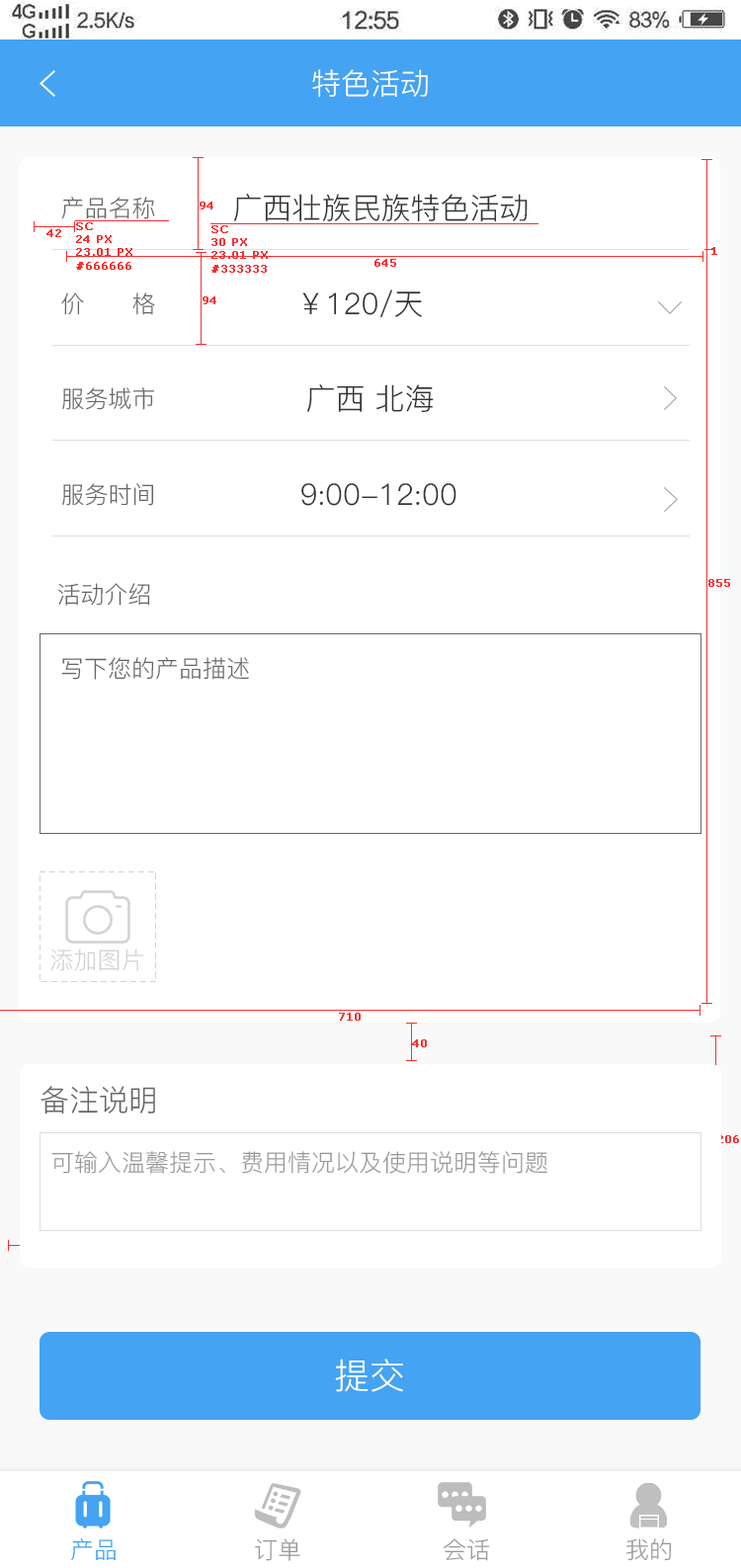
<style>
.page{position:relative;width:741px;height:1568px;background:#ffffff}
.page>*{position:absolute;margin:0}
.t1{font:29.6px "PingFang-SC-Regular";color:#ffffff;text-transform:uppercase}
.t2{font:23.7px "PingFang-SC-Regular";color:#666666;text-transform:uppercase}
.t3{font:29.6px "PingFang-SC-Regular";color:#333333;text-transform:uppercase}
.t4{font:10.9px "Verdana";color:#f83030;font-weight:bold}
.t5{font:23.7px "PingFang-SC-Regular";color:#d3d3d3;text-transform:uppercase}
.t6{font:29.6px "PingFang-SC-Regular";color:#666666;text-transform:uppercase}
.t7{font:23.7px "PingFang-SC-Regular";color:#999999;text-transform:uppercase}
.t8{font:35.6px "PingFang-SC-Regular";color:#ffffff;text-transform:uppercase}
.t9{font:23.7px "PingFang-SC-Regular";color:#44a3f2;text-transform:uppercase}
</style>
<div class="page">
<p class="t1" style="left:312px;top:69px;width:116px;height:29px">特色活动</p>
<p class="t2" style="left:61px;top:197px;width:94px;height:22px">产品名称</p>
<p class="t3" style="left:234px;top:194px;width:294px;height:28px">广西壮族民族特色活动</p>
<p class="t4" style="left:200px;top:202px;width:13px;height:7px">94</p>
<p class="t4" style="left:46px;top:229px;width:15px;height:8px">42</p>
<p class="t4" style="left:76px;top:222px;width:56px;height:48px">SC<br>24 PX<br>23.01 PX<br>#666666</p>
<p class="t4" style="left:211px;top:225px;width:57px;height:48px">SC<br>30 PX<br>23.01 PX<br>#333333</p>
<p class="t4" style="left:711px;top:247px;width:6px;height:8px">1</p>
<p class="t4" style="left:374px;top:259px;width:22px;height:8px">645</p>
<p class="t2" style="left:61px;top:292px;width:94px;height:23px">价      格</p>
<p class="t3" style="left:302px;top:289px;width:120px;height:29px">￥120/天</p>
<p class="t4" style="left:203px;top:296px;width:13px;height:8px">94</p>
<p class="t2" style="left:62px;top:387px;width:92px;height:23px">服务城市</p>
<p class="t3" style="left:307px;top:384px;width:127px;height:29px">广西 北海</p>
<p class="t2" style="left:62px;top:483px;width:92px;height:23px">服务时间</p>
<p class="t3" style="left:301px;top:483px;width:155px;height:23px">9:00-12:00</p>
<p class="t4" style="left:708px;top:579px;width:22px;height:8px">855</p>
<p class="t2" style="left:58px;top:583px;width:92px;height:23px">活动介绍</p>
<p class="t2" style="left:61px;top:657px;width:188px;height:23px">写下您的产品描述</p>
<p class="t5" style="left:50px;top:949px;width:93px;height:22px">添加图片</p>
<p class="t4" style="left:339px;top:1013px;width:22px;height:8px">710</p>
<p class="t4" style="left:412px;top:1039px;width:15px;height:8px">40</p>
<p class="t6" style="left:41px;top:1086px;width:114px;height:28px">备注说明</p>
<p class="t4" style="left:717px;top:1135px;width:22px;height:8px">206</p>
<p class="t7" style="left:51px;top:1151px;width:496px;height:23px">可输入温馨提示、费用情况以及使用说明等问题</p>
<p class="t8" style="left:335px;top:1359px;width:69px;height:33px">提交</p>
<p class="t9" style="left:71px;top:1538px;width:45px;height:23px">产品</p>
<p class="t7" style="left:255px;top:1538px;width:45px;height:23px">订单</p>
<p class="t7" style="left:444px;top:1538px;width:45px;height:23px">会话</p>
<p class="t7" style="left:626px;top:1538px;width:46px;height:23px">我的</p>
</div>
